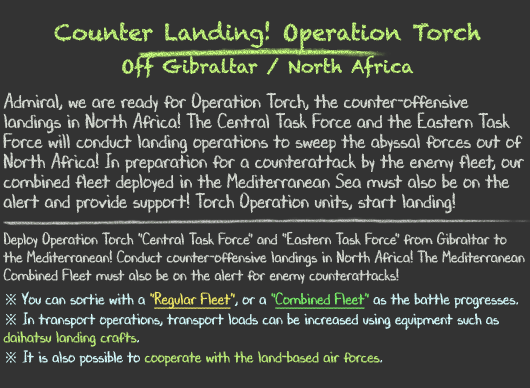
<style>
.page{position:relative;width:530px;height:388px;background:#333333}
.page>*{position:absolute;margin:0}
.t1{font:22px/36px "Chalkduster"}
.t2{font:18px/36px "Chalkduster"}
.t3{font:20px/20px "DJBChalkItUp";color:#d9ded6;scale:0.9 1}
.t4{font:16px/18px "DJBChalkItUp";color:#d9ded6;scale:0.9 1}
.t5{font:16px/24px "DJBChalkItUp";color:#d9ded6;scale:0.9 1}
.t6{font:16px/20px "TimesNewRomanPSMT";color:#d7feff;scale:0.9 1}
.t7{font:16px/20px "DJBChalkItUp";color:#d7feff;scale:0.9 1}
.t8{font:16px/20px "DJBChalkItUp";color:#f5ed68;scale:0.9 1}
.t9{font:16px/20px "DJBChalkItUp";color:#f5ed68;text-decoration:underline;scale:0.9 1}
.t10{font:16px/20px "DJBChalkItUp";color:#7bf26b;scale:0.9 1}
.t11{font:16px/20px "DJBChalkItUp";color:#7bf26b;text-decoration:underline;scale:0.9 1}
.t12{font:16px/18px "TimesNewRomanPSMT";color:#d7feff;scale:0.9 1}
.t13{font:16px/18px "DJBChalkItUp";color:#d7feff;scale:0.9 1}
.t14{font:16px/20px "DJBChalkItUp";color:#bdef78;scale:0.9 1}
.t15{font:16px/18px "DJBChalkItUp";color:#bdef78;scale:0.9 1}
</style>
<div class="page">
<p class="t1" style="left:54px;top:21px;width:427px;height:57px;text-align:center">Counter Landing! Operation Torch<br><span class="t2">Off Gibraltar / North Africa</span></p>
<p class="t3" style="left:3px;top:92px;width:522px;height:275px">Admiral, we are ready for Operation Torch, the counter-offensive<br>landings in North Africa! The Central Task Force and the Eastern Task<br>Force will conduct landing operations to sweep the abyssal forces out of<br>North Africa! In preparation for a counterattack by the enemy fleet, our<br>combined fleet deployed in the Mediterranean Sea must also be on the<br>alert and provide support! Torch Operation units, start landing!<br><br><span class="t4">Deploy Operation Torch "Central Task Force" and "Eastern Task Force" from Gibraltar to<br>the Mediterranean! Conduct counter-offensive landings in North Africa! The Mediterranean<br>Combined Fleet must also be on the alert for enemy counterattacks</span><span class="t5">!<br></span><span class="t6">※ </span><span class="t7">You can sortie with a </span><span class="t8">"</span><span class="t9">Regular Fleet</span><span class="t8">"</span><span class="t7">, or a </span><span class="t10">"</span><span class="t11">Combined Fleet</span><span class="t10">" </span><span class="t7">as the battle progresses.<br></span><span class="t12">※</span><span class="t13"> In transport operations, transport loads can be increased using equipment such as<br></span><span class="t14">daihatsu landing crafts</span><span class="t7">.<br></span><span class="t12">※</span><span class="t13"> It is also possible to </span><span class="t15">cooperate with the land-based air forces</span><span class="t13">.</span></p>
</div>
